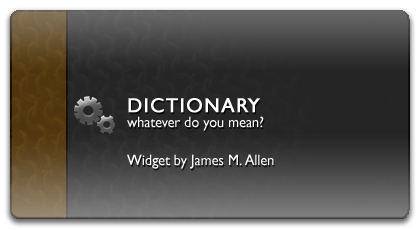
<style>
.page{position:relative;width:420px;height:230px}
.page>*{position:absolute;margin:0}
.t1{font:20px "GillSansMT";letter-spacing:0.05em;color:#ffffff;font-weight:bold}
.t2{font:15px "GillSansMT";color:#ffffff;scale:0.95 1}
</style>
<div class="page">
<p class="t1" style="left:128px;top:98px;width:132px;height:15px">DICTIONARY</p>
<p class="t2" style="left:127px;top:116px;width:137px;height:15px">whatever do you mean?</p>
<p class="t2" style="left:127px;top:154px;width:147px;height:15px">Widget by James M. Allen</p>
</div>
